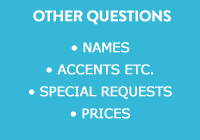
<style>
.page{position:relative;width:200px;height:140px;background:#35b8d7}
.page>*{position:absolute;margin:0}
.t1{font:15px "BrandonGrotesque-Bold";letter-spacing:-0.02em;color:#ffffff;font-weight:bold}
.t2{font:13px/22px "Verdana";letter-spacing:-0.02em;color:#ffffff;font-weight:bold}
</style>
<div class="page">
<p class="t1" style="left:33px;top:10px;width:138px;height:15px">OTHER QUESTIONS</p>
<p class="t2" style="left:29px;top:42px;width:143px;height:77px;text-align:center">• NAMES<br>• ACCENTS ETC.<br>• SPECIAL REQUESTS<br>• PRICES</p>
</div>
